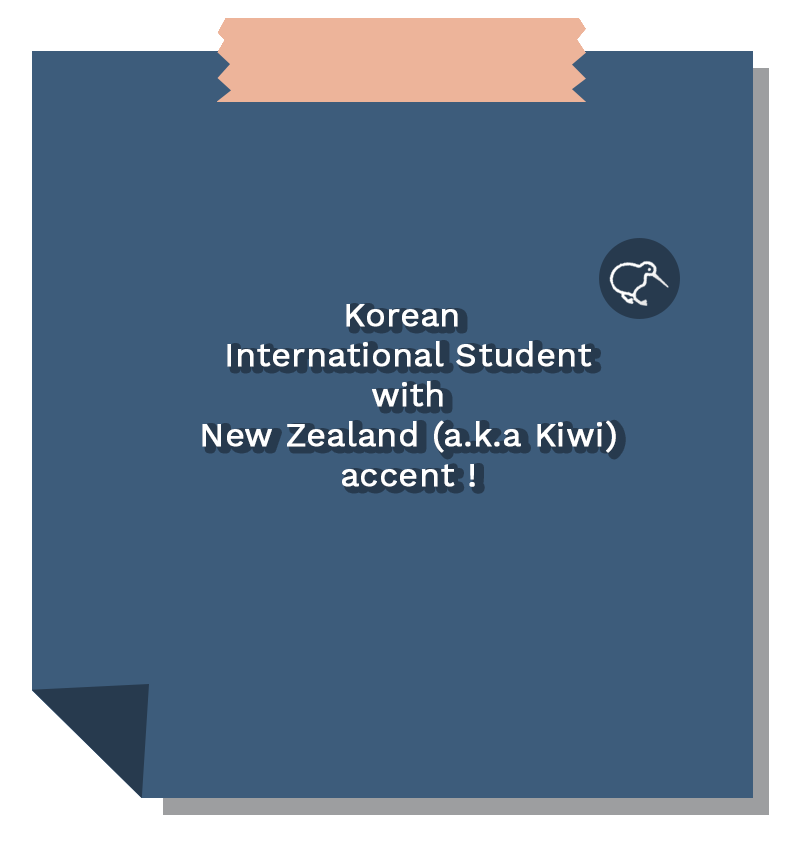
<style>
.page{position:relative;width:800px;height:848px;background:#3d5c7b}
.page>*{position:absolute;margin:0}
.t1{font:33.3px "WorkSans-Regular";color:#ffffff;font-weight:bold}
</style>
<div class="page">
<p class="t1" style="left:202px;top:304px;width:414px;height:183px;text-align:center">Korean <br>International Student<br>with<br>New Zealand (a.k.a Kiwi)<br>accent !</p>
</div>
